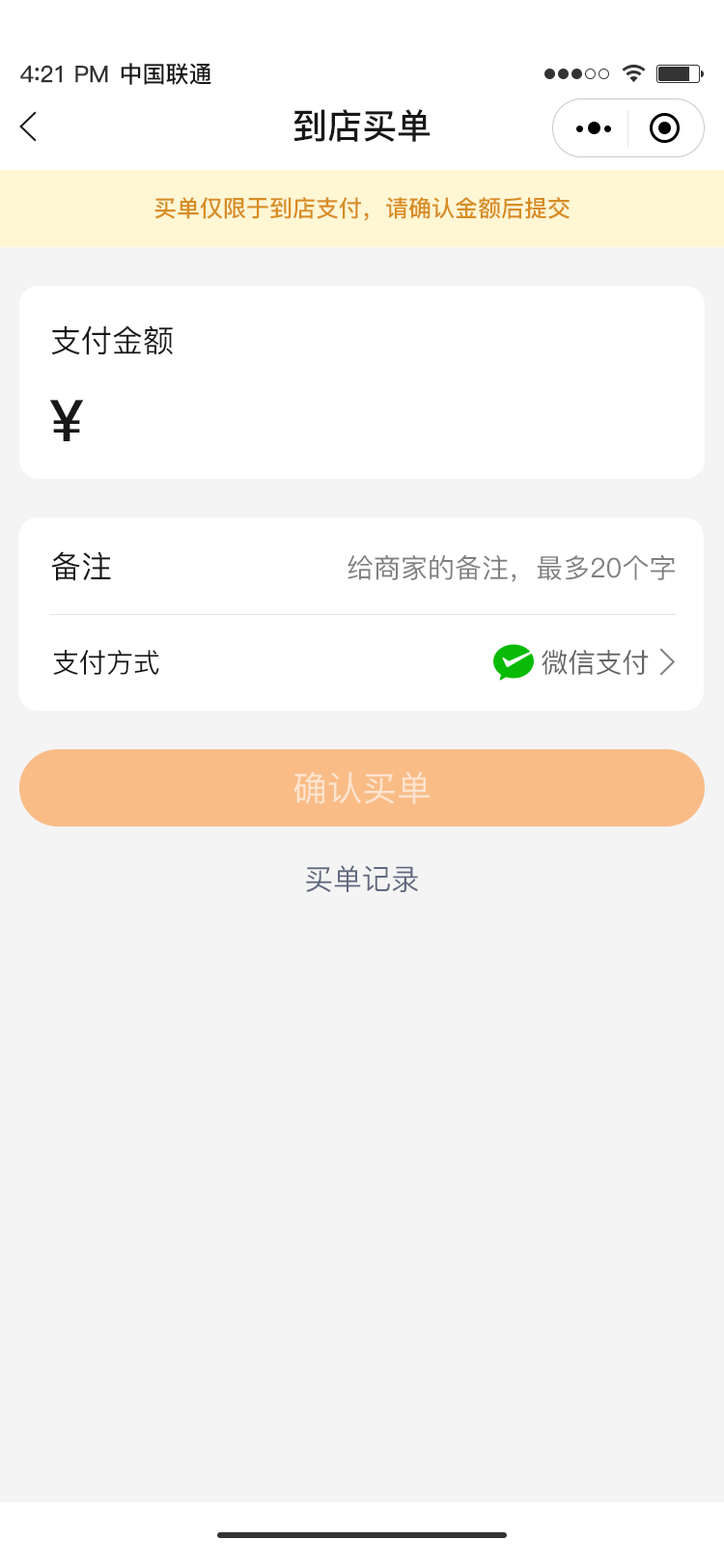
<style>
.page{position:relative;width:724px;height:1568px;background:#f4f4f4}
.page>*{position:absolute;margin:0}
.t1{font:23.2px "PingFang-SC-Bold";letter-spacing:-0.02em;color:#333333}
.t2{font:25.1px "PingFang-SC-Bold";letter-spacing:-0.02em;color:#333333}
.t3{font:23.2px "PingFang-SC-Bold";color:#181818}
.t4{font:34.8px "PingFang-SC-Bold";color:#181818}
.t5{font:23.2px "PingFang-SC-Bold";color:#d78d23}
.t6{font:30.9px "PingFang-SC-Medium";color:#181818}
.t7{font:57.9px "PingFang-SC-Bold";color:#181818}
.t8{font:27px "PingFang-SC-Medium";color:#808080}
.t9{font:27px "PingFang-SC-Medium";color:#181818}
.t10{font:27px "PingFang-SC-Medium";color:#656565}
.t11{font:34.8px "PingFang-SC-Medium";color:#fde4cf}
.t12{font:29px "PingFang-SC-Medium";color:#616980}
</style>
<div class="page">
<p class="t1" style="left:20px;top:65px;width:88px;height:18px">4<span class="t2">:</span>21 PM</p>
<p class="t3" style="left:121px;top:63px;width:90px;height:22px">中国联通</p>
<p class="t4" style="left:294px;top:109px;width:137px;height:33px">到店买单</p>
<p class="t5" style="left:154px;top:197px;width:416px;height:24px">买单仅限于到店支付，请确认金额后提交</p>
<p class="t6" style="left:51px;top:325px;width:122px;height:30px">支付金额</p>
<p class="t7" style="left:49px;top:400px;width:35px;height:41px">￥</p>
<p class="t6" style="left:51px;top:551px;width:60px;height:30px">备注</p>
<p class="t8" style="left:348px;top:554px;width:327px;height:28px">给商家的备注，最多20个字</p>
<p class="t9" style="left:53px;top:650px;width:106px;height:25px">支付方式</p>
<p class="t10" style="left:542px;top:650px;width:107px;height:25px">微信支付</p>
<p class="t11" style="left:294px;top:771px;width:136px;height:33px">确认买单</p>
<p class="t12" style="left:306px;top:865px;width:112px;height:27px">买单记录</p>
</div>
